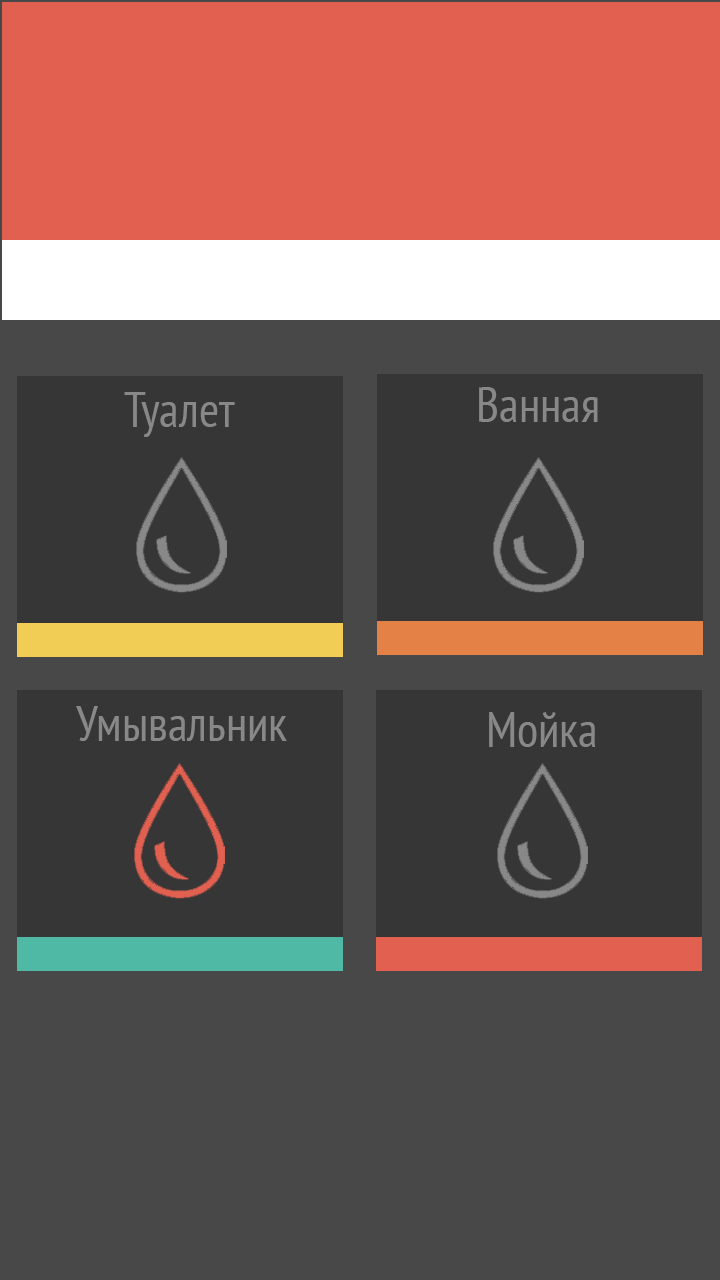
<style>
.page{position:relative;width:720px;height:1280px;background:#484848}
.page>*{position:absolute;margin:0}
.t1{font:49px "PTSans-Narrow";color:#888888}
</style>
<div class="page">
<p class="t1" style="left:479px;top:387px;width:119px;height:35px">Ванная</p>
<p class="t1" style="left:124px;top:392px;width:111px;height:45px">Туалет</p>
<p class="t1" style="left:76px;top:706px;width:211px;height:35px">Умывальник</p>
<p class="t1" style="left:489px;top:712px;width:107px;height:35px">Мойка</p>
</div>
